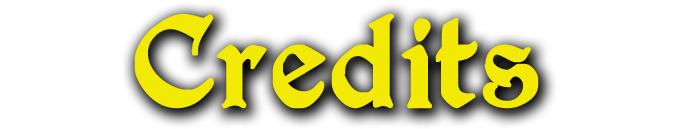
<style>
.page{position:relative;width:680px;height:129px;background:#ffffff}
.page>*{position:absolute;margin:0}
.t1{font:144px "Augusta-Regular";color:#f2ea05;font-weight:bold}
</style>
<div class="page">
<p class="t1" style="left:134px;top:13px;width:405px;height:96px">Credits</p>
</div>
